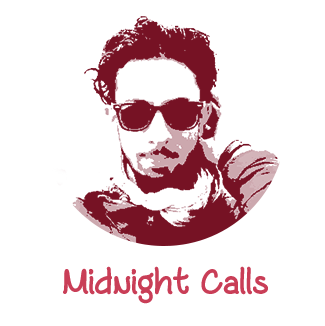
<style>
.page{position:relative;width:325px;height:326px;background:#ffffff}
.page>*{position:absolute;margin:0}
.t1{font:36px "CoffeewithSugar";color:#c93e57}
</style>
<div class="page">
<p class="t1" style="left:63px;top:266px;width:205px;height:38px">Midnight Calls</p>
</div>
